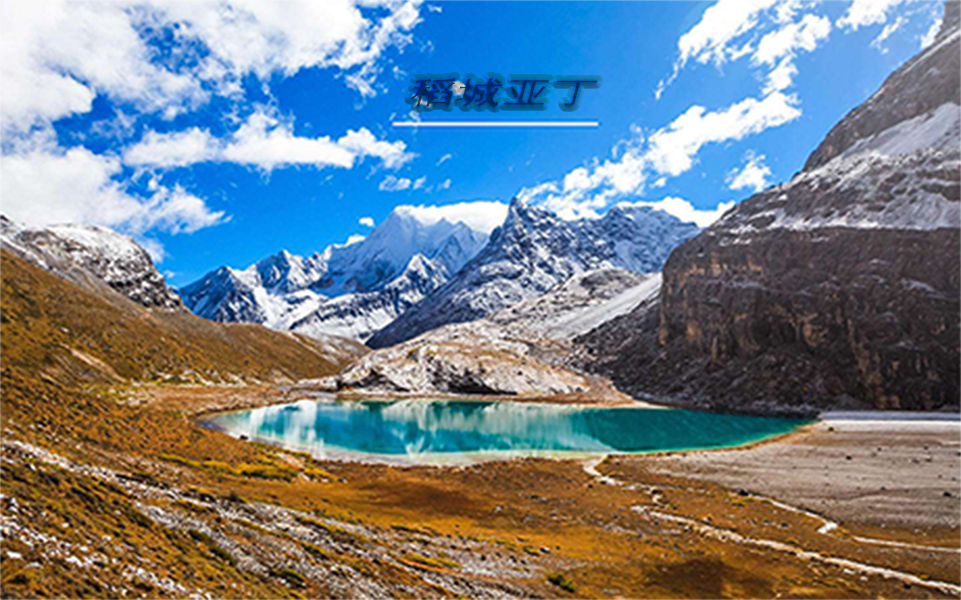
<style>
.page{position:relative;width:961px;height:600px}
.page>*{position:absolute;margin:0}
.t1{font:31.3px "DengXian";color:#012d4f;font-style:italic;scale:1.5 1}
</style>
<div class="page">
<p class="t1" style="left:409px;top:78px;width:189px;height:29px">稻城亚丁</p>
</div>
